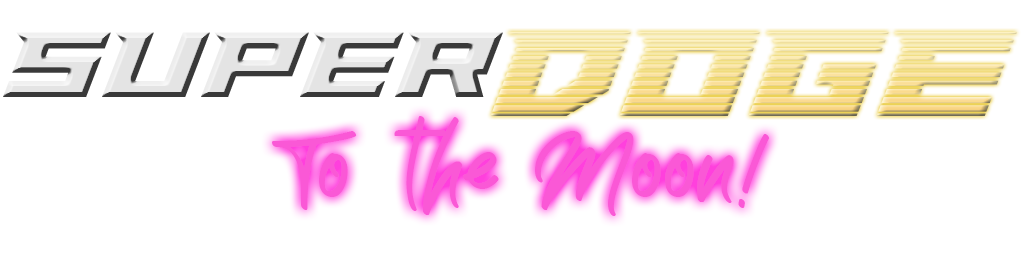
<style>
.page{position:relative;width:1024px;height:256px;background:#ffffff}
.page>*{position:absolute;margin:0}
.t1{font:100px "Paladins";color:#e4e4e4}
.t2{font:130px "PaladinsGradient"}
.t3{font:90px "TheWave";color:#fa58d6}
</style>
<div class="page">
<p class="t1" style="left:3px;top:32px;width:500px;height:65px">Super</p>
<p class="t2" style="left:490px;top:32px;width:527px;height:84px">DOGE</p>
<p class="t3" style="left:272px;top:116px;width:498px;height:100px">To the Moon!</p>
</div>
